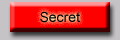
<style>
.page{position:relative;width:120px;height:40px;background:#ff0000}
.page>*{position:absolute;margin:0}
.t1{font:14px "ArialMT";color:#000000}
</style>
<div class="page">
<p class="t1" style="left:40px;top:11px;width:40px;height:12px">Secret</p>
</div>
